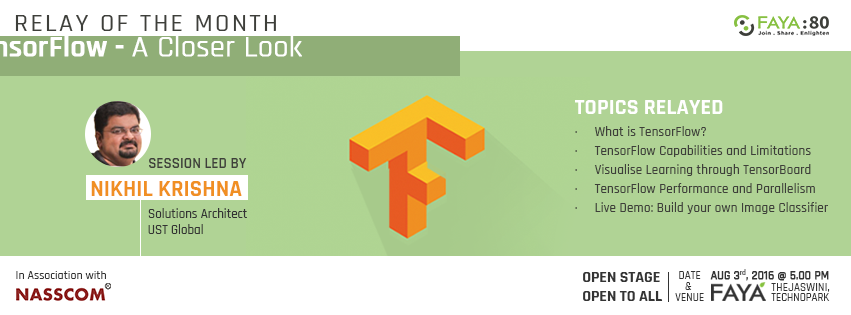
<style>
.page{position:relative;width:851px;height:315px;background:#b0d395}
.page>*{position:absolute;margin:0}
.t1{font:25.3px "Rajdhani-Medium";letter-spacing:0.1em;color:#3e3f3a;text-transform:uppercase}
.t2{font:22.2px "Rajdhani-Bold";color:#ffffff;text-transform:uppercase}
.t3{font:13.4px/19px "Rajdhani-Medium";color:#3e3f3a}
.t4{font:14.5px "Rajdhani-Semibold";color:#3e3f3a;text-transform:uppercase;scale:1.03 1}
.t5{font:23.6px "Rajdhani-Bold";color:#f08f23;text-transform:uppercase}
.t6{font:13px "Rajdhani-Medium";color:#333333}
.t7{font:11.9px "Rajdhani-Medium";color:#333333;text-transform:uppercase;font-weight:bold}
.t8{font:11.9px "Rajdhani-Medium";color:#333333;font-weight:bold}
.t9{font:12px "Rajdhani-Medium";color:#333333}
.t10{font:16.1px "Rajdhani-Bold";color:#343434;text-transform:uppercase}
.t11{font:11px/11.2px "Rajdhani-Medium";color:#333333;text-transform:uppercase}
.t12{font:10.9px/9.8px "Rajdhani-Medium";letter-spacing:0.021em;color:#333333;text-transform:uppercase}
.t13{font:10.9px/9.8px "Rajdhani-Medium";color:#333333;text-transform:uppercase}
</style>
<div class="page">
<p class="t1" style="left:15px;top:15px;width:261px;height:16px">relay of the month</p>
<p class="t2" style="left:575px;top:100px;width:148px;height:14px">topics relayed</p>
<p class="t3" style="left:575px;top:126px;width:253px;height:88px">·     What is TensorFlow?<br>·     TensorFlow Capabilities and Limitations<br>·     Visualise Learning through TensorBoard<br>·     TensorFlow Performance and Parallelism<br>·     Live Demo: Build your own Image Classifier</p>
<p class="t4" style="left:149px;top:158px;width:98px;height:10px">session led by</p>
<p class="t5" style="left:91px;top:181px;width:151px;height:15px">Nikhil Krishna</p>
<p class="t6" style="left:148px;top:208px;width:99px;height:10px">Solutions Architect</p>
<p class="t6" style="left:148px;top:224px;width:55px;height:10px">UST Global</p>
<p class="t7" style="left:710px;top:269px;width:119px;height:12px">AUG 3<span class="t8">rd,</span> 2016 @ 5.00 pm</p>
<p class="t9" style="left:16px;top:271px;width:90px;height:8px">In Association with</p>
<p class="t10" style="left:583px;top:272px;width:80px;height:29px">open stage <br>open to all</p>
<p class="t11" style="left:675px;top:271px;width:29px;height:30px;text-align:center">date<br>&amp; <br>venue</p>
<p class="t12" style="left:771px;top:283px;width:59px;height:18px">thejaswini,<span class="t13"> <br>technopark</span></p>
</div>
